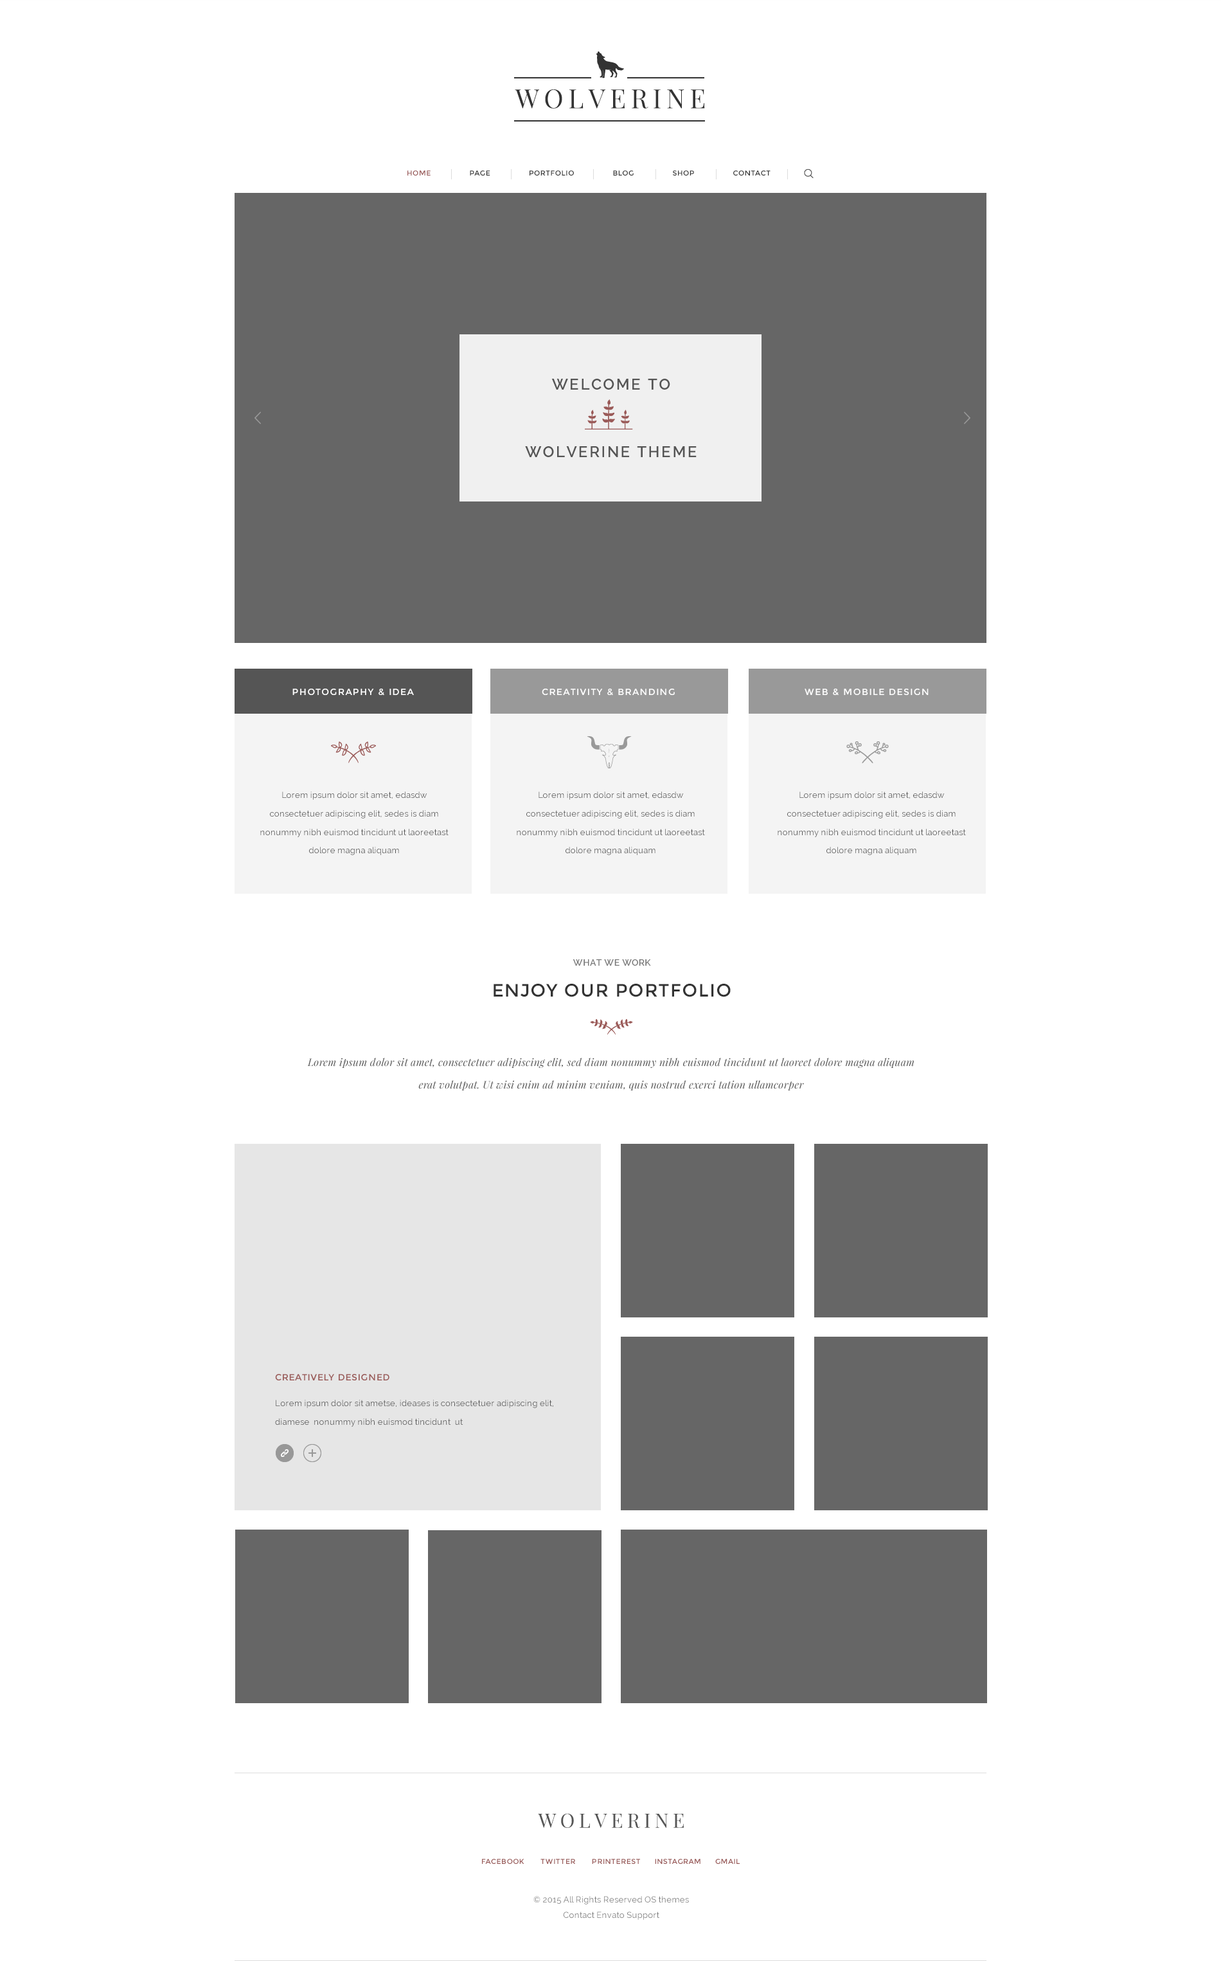
<style>
.page{position:relative;width:1221px;height:1961px;background:#ffffff}
.page>*{position:absolute;margin:0}
.t1{font:26.5px "PlayfairDisplay-Regular";letter-spacing:0.1em;color:#333333}
.t2{font:7.1px "Montserrat-Regular";letter-spacing:0.05em;color:#333333}
.t3{font:7.1px "Montserrat-Regular";letter-spacing:0.05em;color:#995958}
.t4{font:15.4px/33.9px "Raleway-SemiBold";letter-spacing:0.1em;color:#555555}
.t5{font:9px "Montserrat-Regular";letter-spacing:0.1em;color:#ffffff}
.t6{font:8.4px/18.4px "Raleway";letter-spacing:0.02em;color:#535353}
.t7{font:9px "Raleway-SemiBold";letter-spacing:0.05em;color:#777777}
.t8{font:18px "Montserrat-Regular";letter-spacing:0.05em;color:#333333}
.t9{font:10.3px/22.6px "PlayfairDisplay-Italic";letter-spacing:0.02em;color:#535353}
.t10{font:9px "Montserrat-Regular";letter-spacing:0.05em;color:#9a5a58}
.t11{font:8.4px/18.4px "Raleway";letter-spacing:0.02em;color:#545454}
.t12{font:19.9px "PlayfairDisplay-Regular";letter-spacing:0.1em;color:#555555}
.t13{font:8.4px/15px "Raleway";letter-spacing:0.02em;color:#777777}
</style>
<div class="page">
<p class="t1" style="left:515px;top:89px;width:190px;height:20px">WOLVERINE</p>
<p class="t2" style="left:408px;top:170px;width:363px;height:6px"><span class="t3">HOME          </span>PAGE          PORTFOLIO          BLOG          SHOP          CONTACT</p>
<p class="t4" style="left:525px;top:379px;width:172px;height:78px;text-align:center">WELCOME TO<br><br>WOLVERINE THEME</p>
<p class="t5" style="left:292px;top:688px;width:122px;height:8px">PHOTOGRAPHY &amp; IDEA</p>
<p class="t5" style="left:542px;top:688px;width:133px;height:8px">CREATIVITY &amp; BRANDING</p>
<p class="t5" style="left:805px;top:688px;width:124px;height:8px">WEB &amp; MOBILE DESIGN</p>
<p class="t6" style="left:260px;top:791px;width:189px;height:64px;text-align:center">Lorem ipsum dolor sit amet, edasdw consectetuer adipiscing elit, sedes is diam nonummy nibh euismod tincidunt ut laoreetast dolore magna aliquam</p>
<p class="t6" style="left:517px;top:791px;width:188px;height:64px;text-align:center">Lorem ipsum dolor sit amet, edasdw consectetuer adipiscing elit, sedes is diam nonummy nibh euismod tincidunt ut laoreetast dolore magna aliquam</p>
<p class="t6" style="left:778px;top:791px;width:188px;height:64px;text-align:center">Lorem ipsum dolor sit amet, edasdw consectetuer adipiscing elit, sedes is diam nonummy nibh euismod tincidunt ut laoreetast dolore magna aliquam</p>
<p class="t7" style="left:573px;top:959px;width:78px;height:7px">WHAT WE WORK</p>
<p class="t8" style="left:494px;top:984px;width:237px;height:13px">ENJOY OUR PORTFOLIO</p>
<p class="t9" style="left:307px;top:1058px;width:608px;height:32px;text-align:center">Lorem ipsum dolor sit amet, consectetuer adipiscing elit, sed diam nonummy nibh euismod tincidunt ut laoreet dolore magna aliquam erat volutpat. Ut wisi enim ad minim veniam, quis nostrud exerci tation ullamcorper</p>
<p class="t10" style="left:275px;top:1374px;width:115px;height:6px">CREATIVELY DESIGNED</p>
<p class="t11" style="left:275px;top:1400px;width:279px;height:26px">Lorem ipsum dolor sit ametse, ideases is consectetuer adipiscing elit, diamese  nonummy nibh euismod tincidunt  ut</p>
<p class="t12" style="left:538px;top:1813px;width:146px;height:15px">WOLVERINE</p>
<p class="t3" style="left:482px;top:1859px;width:258px;height:5px">FACEBOOK       TWITTER       PRINTEREST      INSTAGRAM      GMAIL</p>
<p class="t13" style="left:534px;top:1896px;width:155px;height:24px;text-align:center">© 2015 All Rights Reserved OS themes<br>Contact Envato Support</p>
</div>
